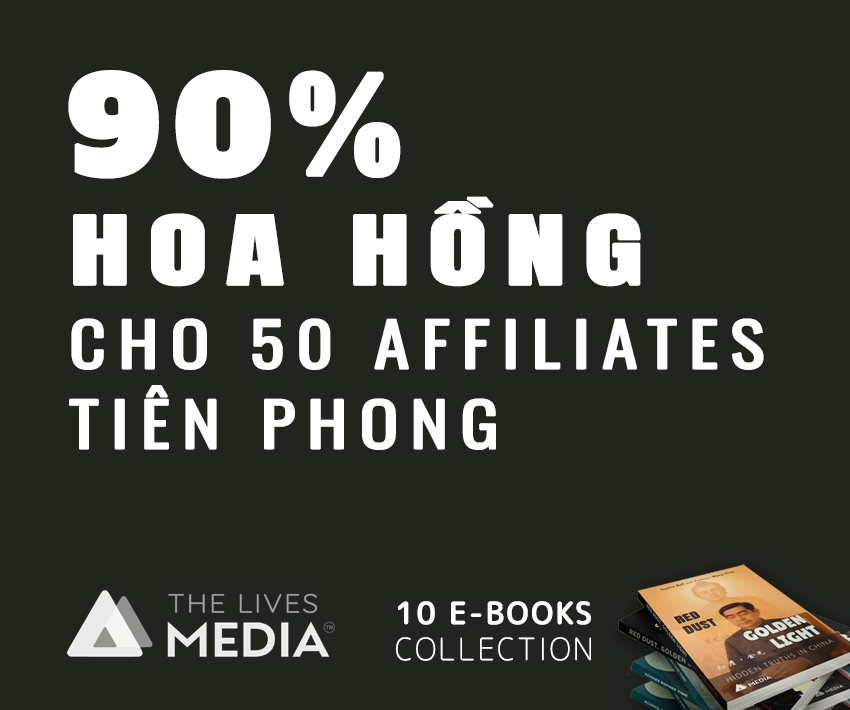
<style>
.page{position:relative;width:850px;height:710px;background:#22241e}
.page>*{position:absolute;margin:0}
.t1{font:130px "AlfaSlabOne-Regular";letter-spacing:0.1em;color:#ffffff;font-weight:bold}
.t2{font:80px "Anton-Regular";letter-spacing:0.13em;color:#ffffff;font-weight:bold;scale:1.5 1}
.t3{font:60px/80px "Oswald-Regular";letter-spacing:0.14em;color:#ffffff;font-weight:bold;scale:1.2 1}
.t4{font:30px "RoundedMplus1c-Medium";letter-spacing:0.06em;color:#ffffff;font-weight:bold}
.t5{font:30px "RoundedMplus1c-Thin";letter-spacing:0.06em;color:#ffffff;font-weight:bold}
</style>
<div class="page">
<p class="t1" style="left:68px;top:70px;width:333px;height:109px">90%</p>
<p class="t2" style="left:73px;top:196px;width:568px;height:91px">HOA HỒNG</p>
<p class="t3" style="left:69px;top:318px;width:695px;height:132px">CHO 50 AFFILIATES TIÊN PHONG</p>
<p class="t4" style="left:396px;top:601px;width:195px;height:60px">10 E-BOOKS <br><span class="t5">COLLECTION</span></p>
</div>
